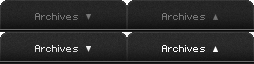
<style>
.page{position:relative;width:254px;height:64px}
.page>*{position:absolute;margin:0}
.t1{font:9px "????ÚçúÒ??????èÊ?ö¼??ÓïÚçõÌ???úÒ";color:#767676}
.t2{font:9px "????ÚçúÒ??????èÊ?ö¼??ÓïÚçõÌ???úÒ";color:#e8e8e8}
.t3{font:9px "????ÚçúÒ??????èÊ?ö¼??ÓïÚçõÌ???úÒ";color:#ffffff}
</style>
<div class="page">
<p class="t1" style="left:35px;top:13px;width:43px;height:7px">Archives</p>
<p class="t1" style="left:162px;top:13px;width:43px;height:7px">Archives</p>
<p class="t2" style="left:35px;top:45px;width:43px;height:7px">Archives</p>
<p class="t3" style="left:162px;top:45px;width:43px;height:7px">Archives</p>
</div>
